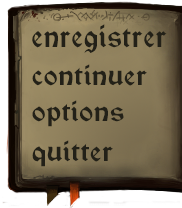
<style>
.page{position:relative;width:182px;height:208px}
.page>*{position:absolute;margin:0}
.t1{font:30.8px "Vinque-Regular";color:#232118;scale:0.91 1}
.t2{font:28px "Vinque-Regular";color:#232118}
</style>
<div class="page">
<p class="t1" style="left:32px;top:24px;width:135px;height:29px">enregistrer</p>
<p class="t2" style="left:32px;top:64px;width:115px;height:22px">continuer</p>
<p class="t2" style="left:32px;top:100px;width:92px;height:27px">options</p>
<p class="t2" style="left:32px;top:140px;width:81px;height:27px">quitter</p>
</div>
